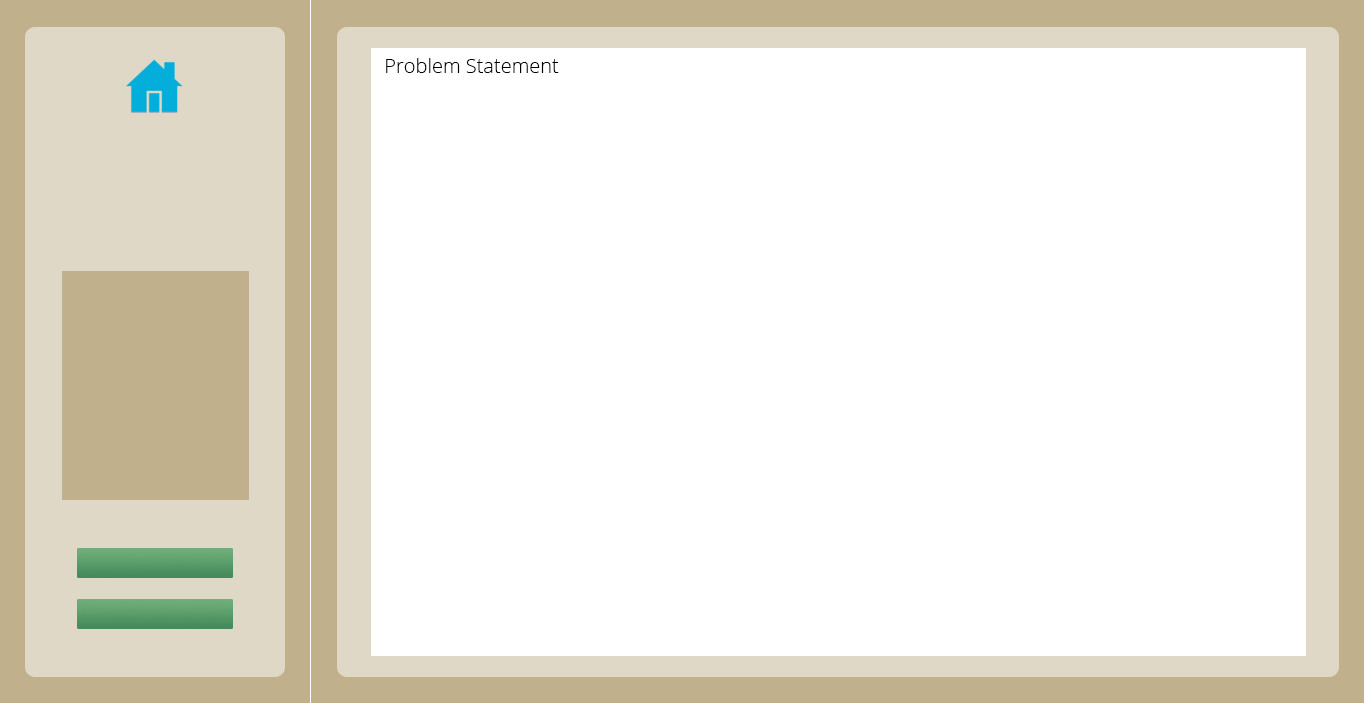
<style>
.page{position:relative;width:1364px;height:703px;background:#ffffff}
.page>*{position:absolute;margin:0}
.t1{font:20px "OpenSans-Light";color:#000000}
</style>
<div class="page">
<p class="t1" style="left:386px;top:58px;width:173px;height:15px">Problem Statement</p>
</div>
